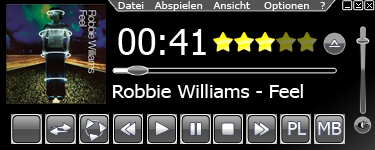
<style>
.page{position:relative;width:375px;height:150px;background:#000000}
.page>*{position:absolute;margin:0}
.t1{font:10px "Verdana";color:#ffffff}
.t2{font:36px "Tahoma";color:#ffffff}
.t3{font:17px "Tahoma";color:#ffffff}
.t4{font:15.9px "Tahoma";color:#ffffff;scale:1.18 1}
.t5{font:18px "Tahoma";color:#ffffff;scale:1.1 1}
.t6{font:18px "Tahoma"}
.t7{font:18px "Tahoma";color:#ffffff}
</style>
<div class="page">
<p class="t1" style="left:118px;top:1px;width:207px;height:10px">Datei   Abspielen   Ansicht    Optionen   ?</p>
<p class="t2" style="left:118px;top:28px;width:88px;height:27px">00:41</p>
<p class="t3" style="left:329px;top:40px;width:11px;height:7px">^</p>
<p class="t4" style="left:329px;top:46px;width:12px;height:1px">_</p>
<p class="t5" style="left:113px;top:84px;width:190px;height:14px">Robbie Williams - Feel</p>
<p class="t6" style="left:288px;top:122px;width:18px;height:13px">PL</p>
<p class="t7" style="left:318px;top:122px;width:24px;height:13px">MB</p>
</div>
